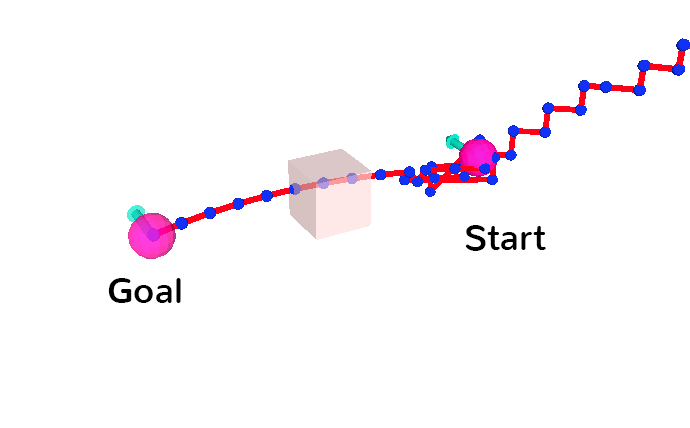
<style>
.page{position:relative;width:690px;height:428px;background:#ffffff}
.page>*{position:absolute;margin:0}
.t1{font:36px "Nunito-Regular";color:#000000}
</style>
<div class="page">
<p class="t1" style="left:465px;top:225px;width:81px;height:26px">Start</p>
<p class="t1" style="left:108px;top:278px;width:73px;height:25px">Goal</p>
</div>
